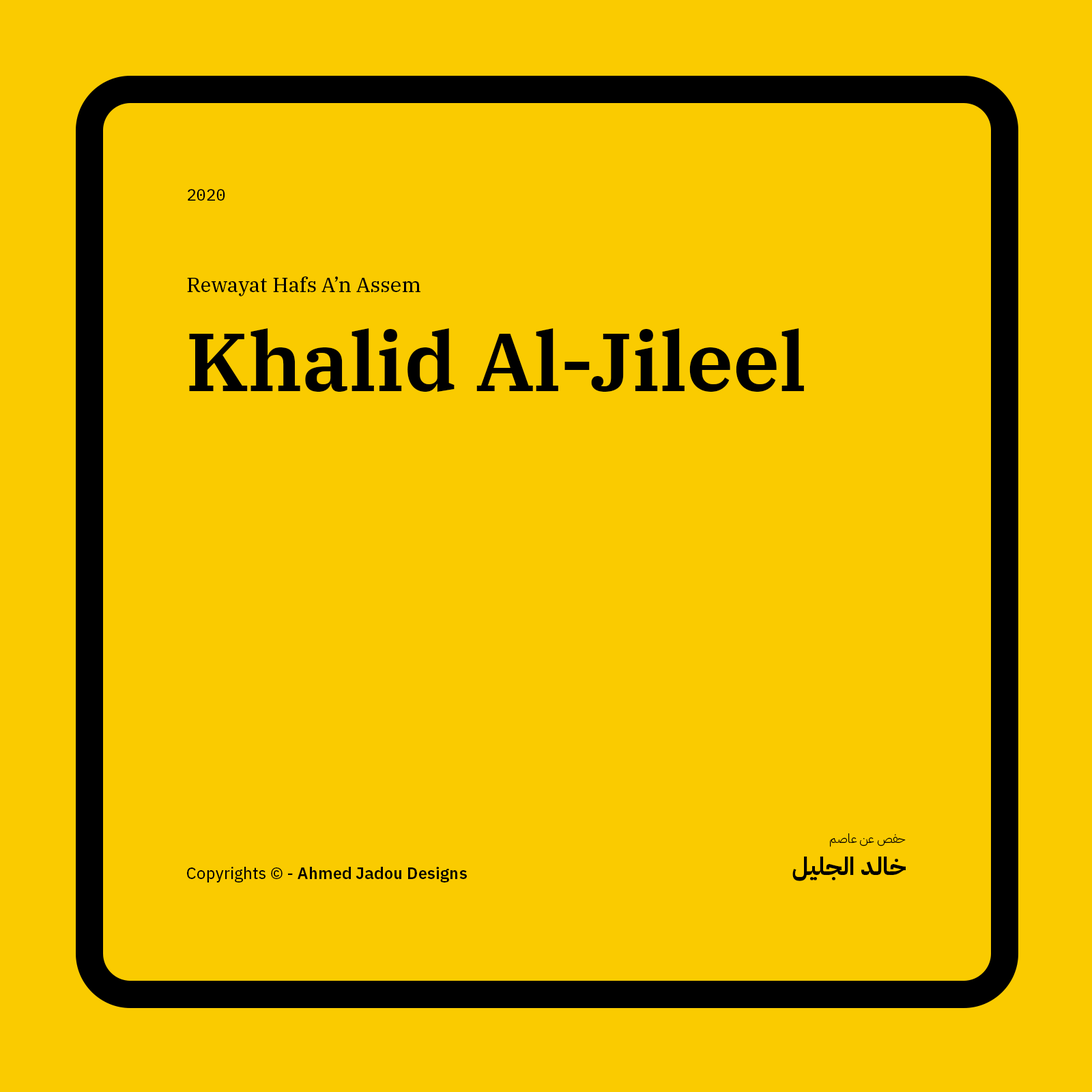
<style>
.page{position:relative;width:1092px;height:1092px;background:#facb00}
.page>*{position:absolute;margin:0}
.t1{font:16.4px "IBMPlexMono-Text";color:#000000}
.t2{font:20.5px "IBMPlexSerif-Text";color:#000000}
.t3{font:81.9px "IBMPlexSerif-SemiBold";color:#000000}
.t4{font:12.3px "IBMPlexArabic-Light";color:#000000}
.t5{font:24.6px "IBMPlexArabic-Bold";color:#000000}
.t6{font:16.4px "IBMPlexSans-SemiBold";color:#000000}
.t7{font:16.4px "IBMPlexSans-Text";color:#000000}
</style>
<div class="page">
<p class="t1" style="left:188px;top:189px;width:37px;height:12px">2020</p>
<p class="t2" style="left:187px;top:276px;width:233px;height:20px">Rewayat Hafs A’n Assem</p>
<p class="t3" style="left:189px;top:328px;width:615px;height:64px">Khalid Al-Jileel</p>
<p class="t4" style="left:830px;top:833px;width:76px;height:14px">حفص عن عاصم</p>
<p class="t5" style="left:792px;top:857px;width:114px;height:24px">خالد الجليل</p>
<p class="t6" style="left:187px;top:867px;width:280px;height:15px"><span class="t7">Copyrights © - </span>Ahmed Jadou Designs</p>
</div>
